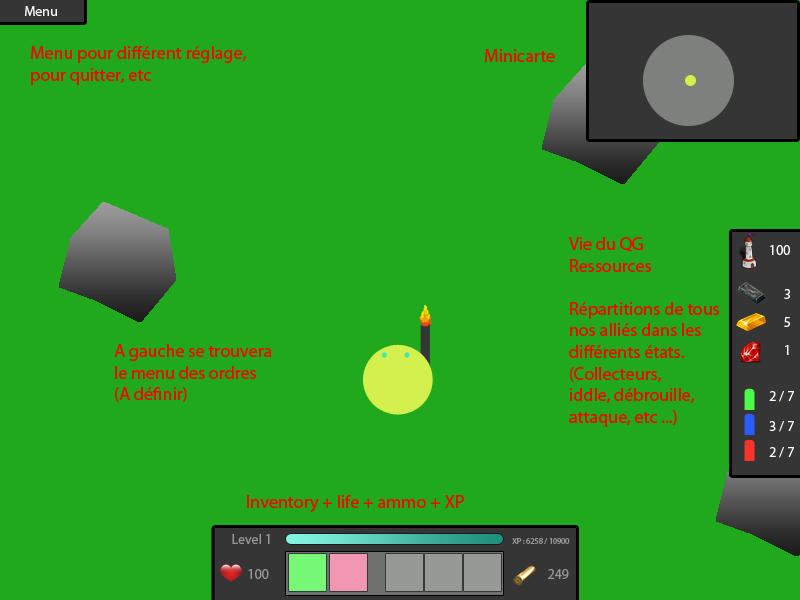
<style>
.page{position:relative;width:800px;height:600px;background:#20a91d}
.page>*{position:absolute;margin:0}
.t1{font:14px "MyriadPro-Regular";color:#ffffff}
.t2{font:18px "MyriadPro-Regular";color:#ff0000}
.t3{font:14px "MyriadPro-Regular";color:#969996}
.t4{font:8px "MyriadPro-Regular";color:#969996}
</style>
<div class="page">
<p class="t1" style="left:25px;top:6px;width:32px;height:10px">Menu</p>
<p class="t2" style="left:31px;top:46px;width:215px;height:39px">Menu pour différent réglage, <br>pour quitter, etc</p>
<p class="t2" style="left:485px;top:49px;width:70px;height:13px">Minicarte</p>
<p class="t2" style="left:569px;top:237px;width:150px;height:190px">Vie du QG<br>Ressources<br><br>Répartitions de tous<br>nos alliés dans les<br>différents états.<br>(Collecteurs,<br>iddle, débrouille,<br>attaque, etc ...)</p>
<p class="t1" style="left:770px;top:245px;width:20px;height:10px">100</p>
<p class="t1" style="left:784px;top:289px;width:6px;height:10px">3</p>
<p class="t1" style="left:784px;top:317px;width:6px;height:10px">5</p>
<p class="t2" style="left:114px;top:344px;width:158px;height:58px">A gauche se trouvera <br>le menu des ordres<br>(A définir)</p>
<p class="t1" style="left:785px;top:345px;width:4px;height:10px">1</p>
<p class="t1" style="left:769px;top:391px;width:25px;height:11px">2 / 7</p>
<p class="t1" style="left:769px;top:421px;width:25px;height:11px">3 / 7</p>
<p class="t1" style="left:769px;top:447px;width:25px;height:11px">2 / 7</p>
<p class="t2" style="left:247px;top:495px;width:217px;height:18px">Inventory + life + ammo + XP</p>
<p class="t3" style="left:232px;top:534px;width:38px;height:10px">Level 1</p>
<p class="t4" style="left:512px;top:538px;width:58px;height:6px">XP : 6258 / 10900</p>
<p class="t3" style="left:248px;top:569px;width:21px;height:10px">100</p>
<p class="t3" style="left:548px;top:569px;width:21px;height:10px">249</p>
</div>
